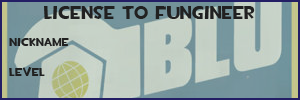
<style>
.page{position:relative;width:300px;height:100px}
.page>*{position:absolute;margin:0}
.t1{font:18px "TF2Build";color:#212121}
.t2{font:12px "TF2Build";color:#212121}
</style>
<div class="page">
<p class="t1" style="left:44px;top:6px;width:211px;height:13px">license to Fungineer</p>
<p class="t2" style="left:9px;top:38px;width:60px;height:9px">nickname</p>
<p class="t2" style="left:9px;top:67px;width:36px;height:9px">Level</p>
</div>
